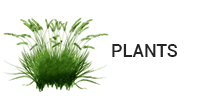
<style>
.page{position:relative;width:200px;height:100px;background:#ffffff}
.page>*{position:absolute;margin:0}
.t1{font:18px "Roboto-Medium";color:#242424}
</style>
<div class="page">
<p class="t1" style="left:112px;top:44px;width:66px;height:13px">PLANTS</p>
</div>
